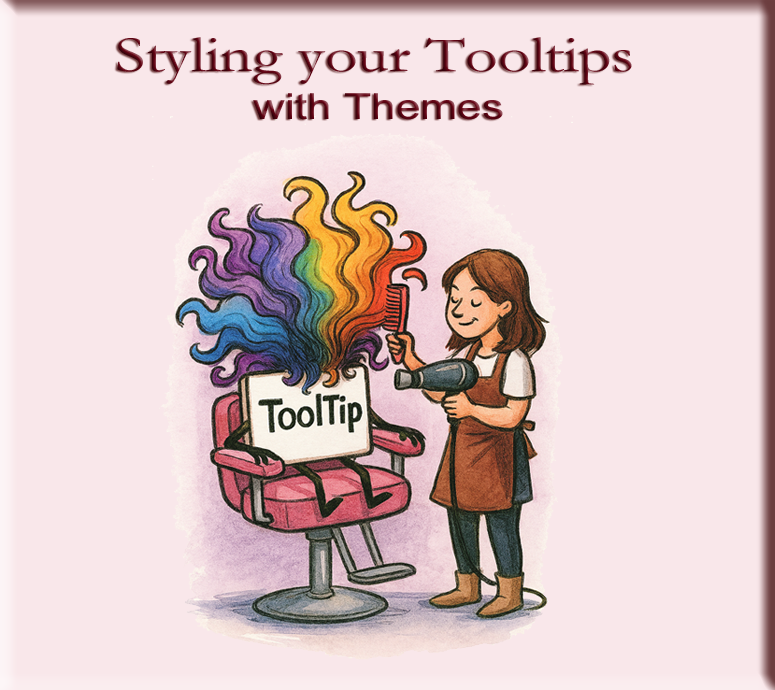
<style>
.page{position:relative;width:775px;height:690px;background:#f9e7ea}
.page>*{position:absolute;margin:0}
.t1{font:51.7px "Garamond";scale:1.24 1}
.t2{font:35.7px "ArialMT";scale:1.24 1}
</style>
<div class="page">
<p class="t1" style="left:117px;top:37px;width:515px;height:48px">Styling your Tooltips</p>
<p class="t2" style="left:253px;top:93px;width:250px;height:27px">with Themes</p>
</div>
